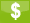
<style>
.page{position:relative;width:30px;height:23px;background:#88ba14}
.page>*{position:absolute;margin:0}
.t1{font:20px "Arial-BoldMT";color:#ffffff}
</style>
<div class="page">
<p class="t1" style="left:10px;top:2px;width:11px;height:18px">$</p>
</div>
